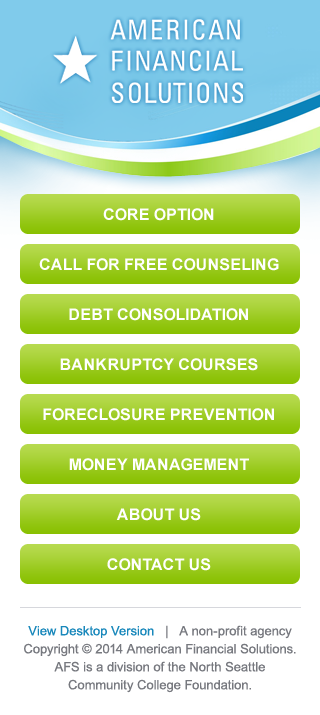
<style>
.page{position:relative;width:320px;height:715px;background:#ffffff}
.page>*{position:absolute;margin:0}
.t1{font:16px/20px "Arial-BoldMT";color:#ffffff;text-transform:uppercase}
.t2{font:13px/18px "ArialMT";color:#77797f}
.t3{font:13px/18px "ArialMT";color:#1988bb}
</style>
<div class="page">
<p class="t1" style="left:39px;top:208px;width:240px;height:363px;text-align:center">Core Option<br>Call For free Counseling<br>Debt Consolidation<br>Bankruptcy Courses<br>Foreclosure Prevention<br>Money Management<br>About Us<br>Contact Us</p>
<p class="t2" style="left:24px;top:625px;width:272px;height:68px;text-align:center"><span class="t3">View Desktop Version</span>   |   A non-profit agency <br>Copyright © 2014 American Financial Solutions.<br>AFS is a division of the North Seattle <br>Community College Foundation.</p>
</div>
